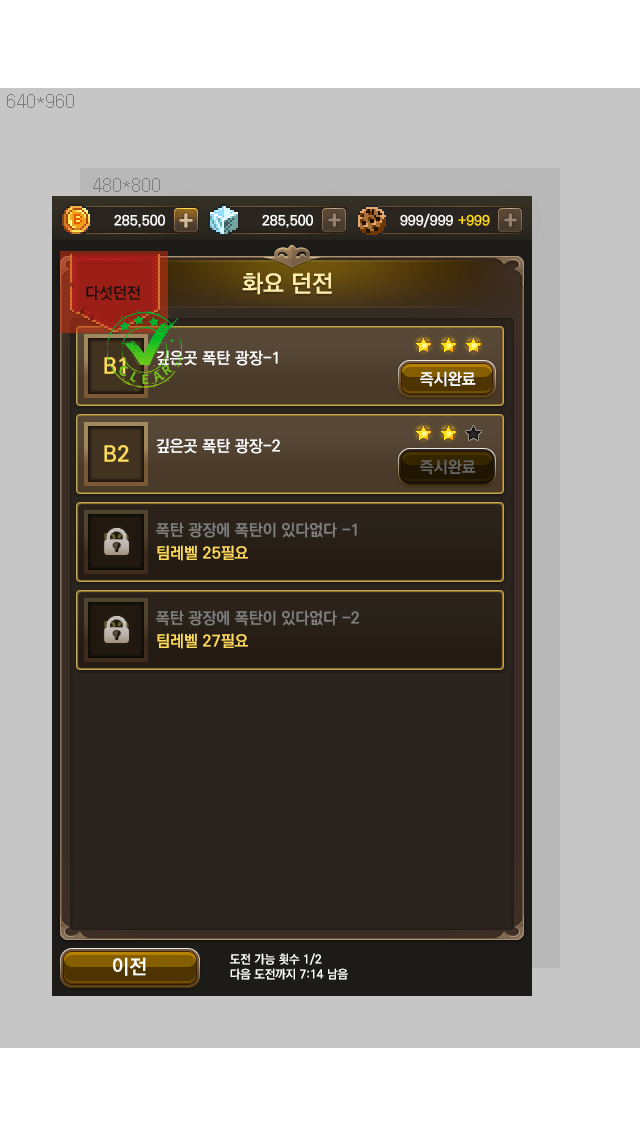
<style>
.page{position:relative;width:640px;height:1136px;background:#c6c6c6}
.page>*{position:absolute;margin:0}
.t1{font:24px "KoPubDotumBold";color:#ffedab}
.t2{font:16px "KoPubDotumBold";color:#1b0e0f}
.t3{font:16px "KoPubDotumBold";color:#ffffff}
.t4{font:22px "KoPubDotumBold";color:#ffda5b}
.t5{font:13.7px "NotoSansCJKkr-Bold";letter-spacing:0.02em;color:#71c219;text-transform:uppercase}
.t6{font:12.5px "NotoSansCJKkr-Bold";letter-spacing:0.02em;color:#71c219;text-transform:uppercase}
.t7{font:12.8px "NotoSansCJKkr-Bold";letter-spacing:0.02em;color:#71c219;text-transform:uppercase}
.t8{font:13px "NotoSansCJKkr-Bold";letter-spacing:0.02em;color:#71c219;text-transform:uppercase}
.t9{font:16px "KoPubDotumBold";color:#666666}
.t10{font:16px "KoPubDotumBold";color:#7f7f7f}
.t11{font:16px "KoPubDotumBold";color:#ffda5b}
.t12{font:12px "KoPubDotumBold";color:#ffffff}
.t13{font:20px "KoPubDotumBold";color:#ffffff}
</style>
<div class="page">
<p class="t1" style="left:242px;top:272px;width:90px;height:23px">화요 던전</p>
<p class="t2" style="left:86px;top:285px;width:54px;height:16px">다섯던전</p>
<p class="t3" style="left:156px;top:350px;width:122px;height:16px">깊은곳 폭탄 광장-1</p>
<p class="t4" style="left:104px;top:357px;width:22px;height:17px">B1</p>
<p class="t5" style="left:119px;top:365px;width:10px;height:12px;rotate:19deg">c</p>
<p class="t6" style="left:161px;top:365px;width:12px;height:11px;rotate:-35deg">r</p>
<p class="t6" style="left:129px;top:371px;width:7px;height:12px;rotate:29deg">l</p>
<p class="t7" style="left:142px;top:374px;width:7px;height:10px;rotate:-1deg">e</p>
<p class="t8" style="left:154px;top:371px;width:10px;height:11px;rotate:-27deg">a</p>
<p class="t3" style="left:420px;top:371px;width:56px;height:16px">즉시완료</p>
<p class="t3" style="left:156px;top:438px;width:124px;height:16px">깊은곳 폭탄 광장-2</p>
<p class="t4" style="left:104px;top:445px;width:25px;height:17px">B2</p>
<p class="t9" style="left:420px;top:459px;width:56px;height:16px">즉시완료</p>
<p class="t10" style="left:156px;top:522px;width:201px;height:16px">폭탄 광장에 폭탄이 있다없다 -1</p>
<p class="t11" style="left:157px;top:545px;width:91px;height:16px">팀레벨 25필요</p>
<p class="t10" style="left:156px;top:610px;width:203px;height:16px">폭탄 광장에 폭탄이 있다없다 -2</p>
<p class="t11" style="left:157px;top:633px;width:91px;height:16px">팀레벨 27필요</p>
<p class="t12" style="left:230px;top:953px;width:118px;height:27px">도전 가능 횟수 1/2<br>다음 도전까지 7:14 남음</p>
<p class="t13" style="left:113px;top:957px;width:33px;height:19px">이전</p>
</div>
